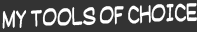
<style>
.page{position:relative;width:197px;height:32px;background:#333333}
.page>*{position:absolute;margin:0}
.t1{font:28px "SuplexmentaryComicNC";color:#ffffff;scale:0.64 1}
</style>
<div class="page">
<p class="t1" style="left:2px;top:3px;width:195px;height:26px;rotate:-2deg">MY TOOLS OF CHOICE</p>
</div>
